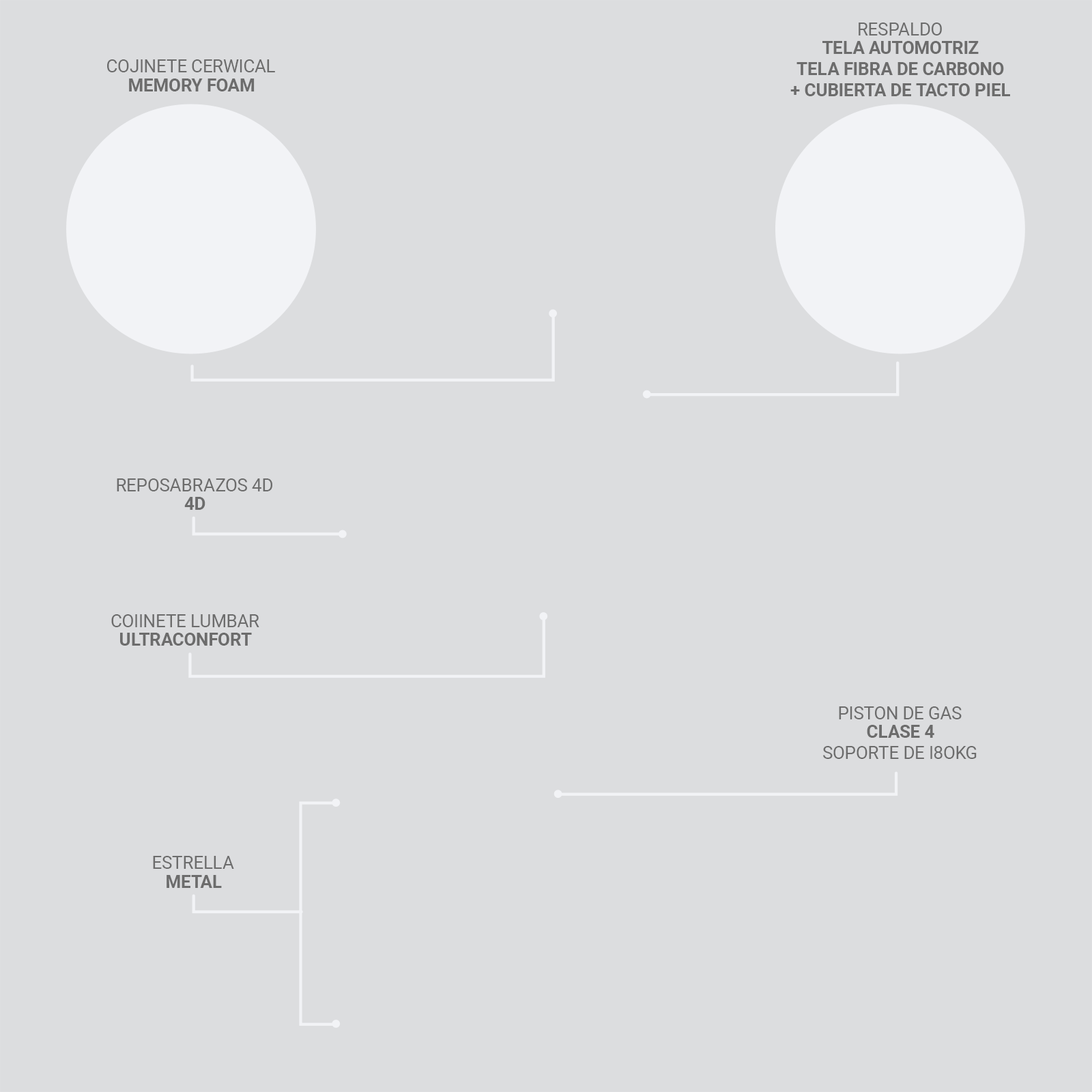
<style>
.page{position:relative;width:1092px;height:1092px;background:#dcdddf}
.page>*{position:absolute;margin:0}
.t1{font:17.5px "Roboto-Regular";color:#6c6c6c}
.t2{font:17.5px "Roboto-Bold";color:#6c6c6c}
</style>
<div class="page">
<p class="t1" style="left:859px;top:23px;width:83px;height:12px">RESPALDO</p>
<p class="t2" style="left:790px;top:41px;width:220px;height:55px;text-align:center">TELA AUTOMOTRIZ<br>TELA FIBRA DE CARBONO<br>+ CUBIERTA DE TACTO PIEL</p>
<p class="t1" style="left:107px;top:59px;width:168px;height:13px">COJINETE CERWICAL</p>
<p class="t2" style="left:129px;top:78px;width:126px;height:13px">MEMORY FOAM</p>
<p class="t1" style="left:117px;top:478px;width:155px;height:13px">REPOSABRAZOS 4D</p>
<p class="t2" style="left:184px;top:497px;width:21px;height:13px">4D</p>
<p class="t1" style="left:111px;top:614px;width:148px;height:13px">COIINETE LUMBAR</p>
<p class="t2" style="left:120px;top:633px;width:132px;height:13px">ULTRACONFORT</p>
<p class="t1" style="left:839px;top:706px;width:123px;height:13px">PISTON DE GAS</p>
<p class="t2" style="left:867px;top:725px;width:67px;height:13px">CLASE 4</p>
<p class="t1" style="left:823px;top:746px;width:154px;height:13px">SOPORTE DE I8OKG</p>
<p class="t1" style="left:153px;top:856px;width:81px;height:13px">ESTRELLA</p>
<p class="t2" style="left:167px;top:875px;width:55px;height:13px">METAL</p>
</div>
